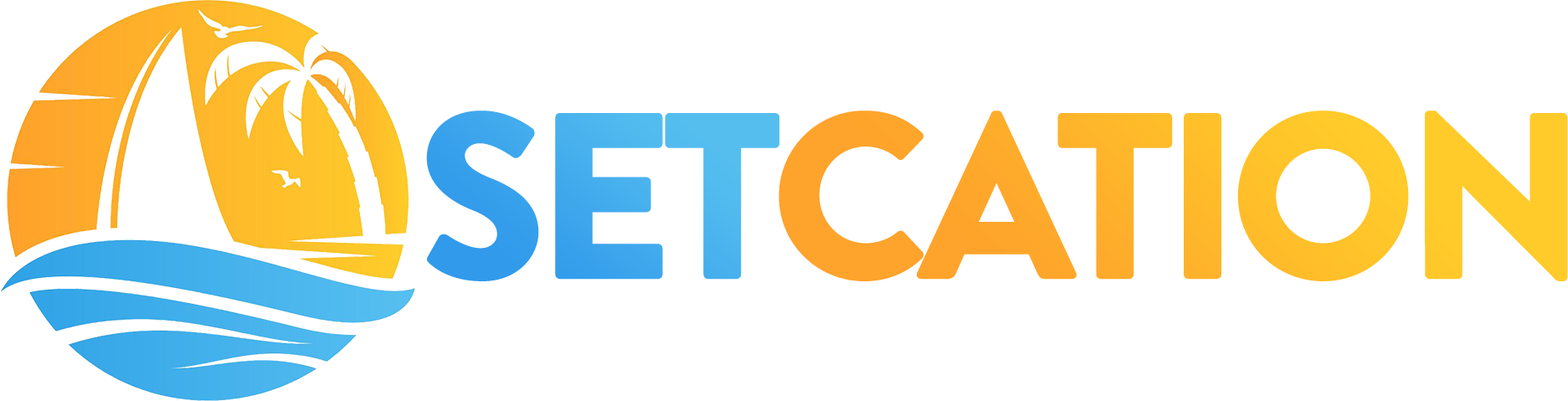
<style>
.page{position:relative;width:1568px;height:401px;background:#ffffff}
.page>*{position:absolute;margin:0}
.t1{font:236.7px "BrandonGrotesque-Black";letter-spacing:-0.05em;color:#55beef;text-transform:uppercase}
.t2{font:236.7px "BrandonGrotesque-Black";letter-spacing:-0.05em;color:#ffcb2a;text-transform:uppercase}
</style>
<div class="page">
<p class="t1" style="left:426px;top:111px;width:353px;height:170px">Set</p>
<p class="t2" style="left:779px;top:111px;width:789px;height:170px">cation</p>
</div>
